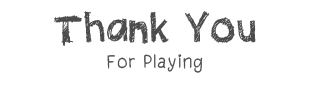
<style>
.page{position:relative;width:310px;height:86px;background:#ffffff}
.page>*{position:absolute;margin:0}
.t1{font:56px "QuickPencil-Regular";color:#4c4c4c}
.t2{font:26px "Pencil-Regular";color:#4c4c4c}
</style>
<div class="page">
<p class="t1" style="left:54px;top:11px;width:202px;height:35px">Thank You</p>
<p class="t2" style="left:107px;top:54px;width:96px;height:19px">For Playing</p>
</div>
